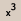
<style>
.page{position:relative;width:21px;height:21px;background:#d9cdc1}
.page>*{position:absolute;margin:0}
.t1{font:9px "Tahoma";color:#000000}
</style>
<div class="page">
<p class="t1" style="left:11px;top:3px;width:5px;height:8px">3</p>
<p class="t1" style="left:6px;top:11px;width:5px;height:5px">x</p>
</div>
